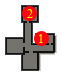
<style>
.page{position:relative;width:61px;height:76px;background:#ffffff}
.page>*{position:absolute;margin:0}
.t1{font:20px "TimesNewRomanPSMT";color:#fee902}
</style>
<div class="page">
<p class="t1" style="left:27px;top:9px;width:6px;height:9px">2</p>
<p class="t1" style="left:39px;top:34px;width:4px;height:9px">1</p>
</div>
